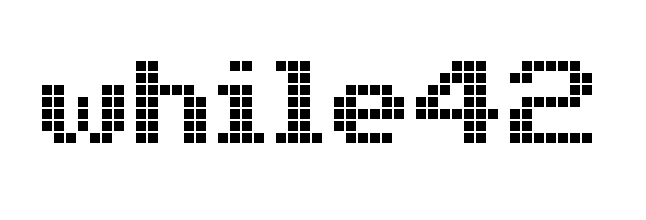
<style>
.page{position:relative;width:646px;height:220px;background:#ffffff}
.page>*{position:absolute;margin:0}
.t1{font:100px "BoldLEDBoard-7";color:#000000}
</style>
<div class="page">
<p class="t1" style="left:42px;top:61px;width:550px;height:82px">while42</p>
</div>
